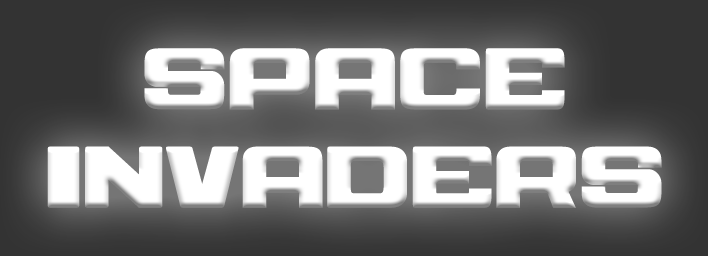
<style>
.page{position:relative;width:708px;height:256px}
.page>*{position:absolute;margin:0}
.t1{font:81.8px "SPACE-Regular";color:#ffffff}
</style>
<div class="page">
<p class="t1" style="left:47px;top:48px;width:615px;height:160px;text-align:center">SPACE<br>INVADERS</p>
</div>
